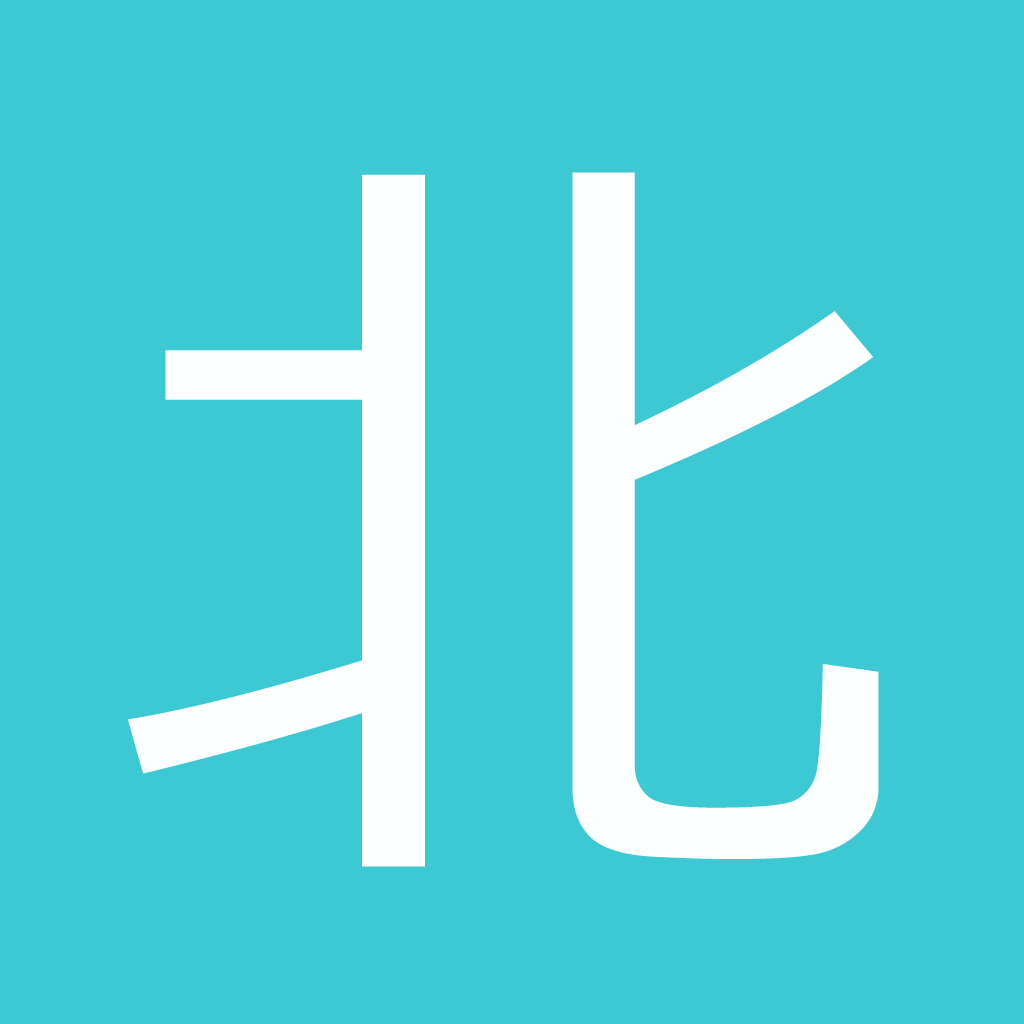
<style>
.page{position:relative;width:1024px;height:1024px;background:#3dc9d4}
.page>*{position:absolute;margin:0}
.t1{font:800px "Meiryo";color:#feffff}
</style>
<div class="page">
<p class="t1" style="left:128px;top:172px;width:751px;height:695px">北</p>
</div>
